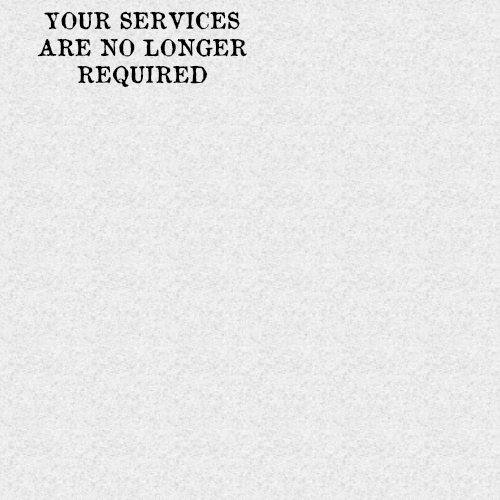
<style>
.page{position:relative;width:500px;height:500px}
.page>*{position:absolute;margin:0}
.t1{font:22.4px "OldNewspaperTypes";color:#000000;text-transform:uppercase}
</style>
<div class="page">
<p class="t1" style="left:37px;top:11px;width:210px;height:77px;text-align:center">Your Services<br>Are No longer<br>required</p>
</div>
